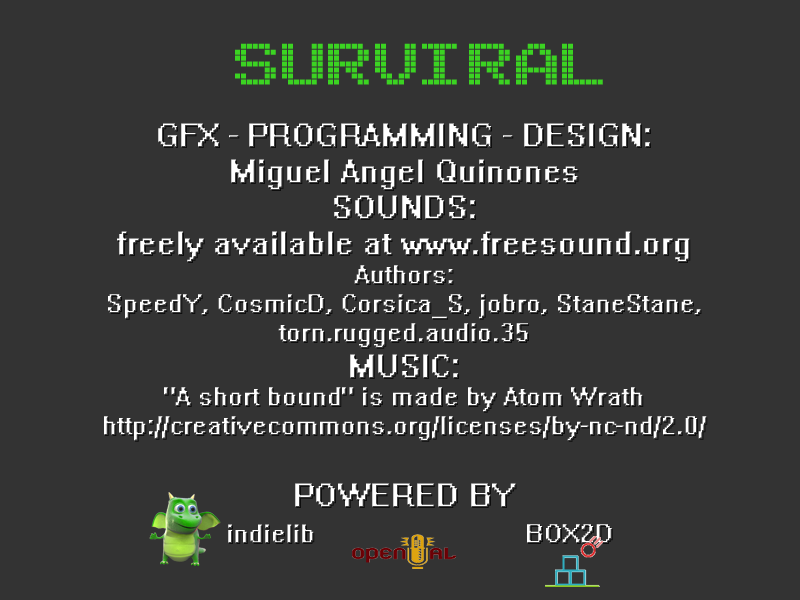
<style>
.page{position:relative;width:800px;height:600px;background:#333333}
.page>*{position:absolute;margin:0}
.t1{font:90px "Arcade";color:#3bd322}
.t2{font:30px "System";color:#ffffff}
.t3{font:24px "System";color:#ffffff}
.t4{font:23.7px "System";color:#ffffff}
</style>
<div class="page">
<p class="t1" style="left:235px;top:43px;width:368px;height:42px">SURVIRAL</p>
<p class="t2" style="left:104px;top:123px;width:603px;height:420px;text-align:center">GFX - PROGRAMMING - DESIGN:<br>Miguel Angel Quinones<br>SOUNDS: <br>freely available at www.freesound.org<br><span class="t3">Authors: <br>SpeedY, CosmicD, Corsica_S, jobro, StaneStane, torn.rugged.audio.35<br></span>MUSIC:<br><span class="t3">"A short bound" is made by Atom Wrath<br>http://creativecommons.org/licenses/by-nc-nd/2.0/<br></span><br>POWERED BY<br>                      <span class="t4">indielib          </span><span class="t3">BOX2D</span></p>
</div>
